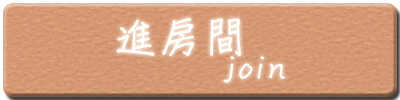
<style>
.page{position:relative;width:400px;height:100px}
.page>*{position:absolute;margin:0}
.t1{font:41.7px "DFChu-W4-WINP-BF";letter-spacing:0.05em;color:#ffffff;font-weight:bold}
.t2{font:33.3px "DFChu-W4-WINP-BF";letter-spacing:0.05em;color:#ffffff;font-weight:bold}
</style>
<div class="page">
<p class="t1" style="left:116px;top:18px;width:125px;height:39px">進房間</p>
<p class="t2" style="left:223px;top:56px;width:62px;height:27px">join</p>
</div>
